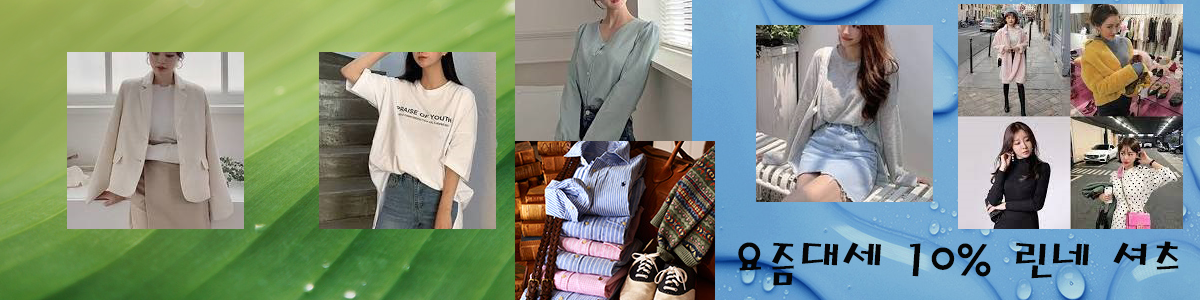
<style>
.page{position:relative;width:1200px;height:300px}
.page>*{position:absolute;margin:0}
.t1{font:48px "MagicR-HM";color:#050505}
</style>
<div class="page">
<p class="t1" style="left:738px;top:241px;width:441px;height:45px">요즘대세 10% 린네 셔츠</p>
</div>
